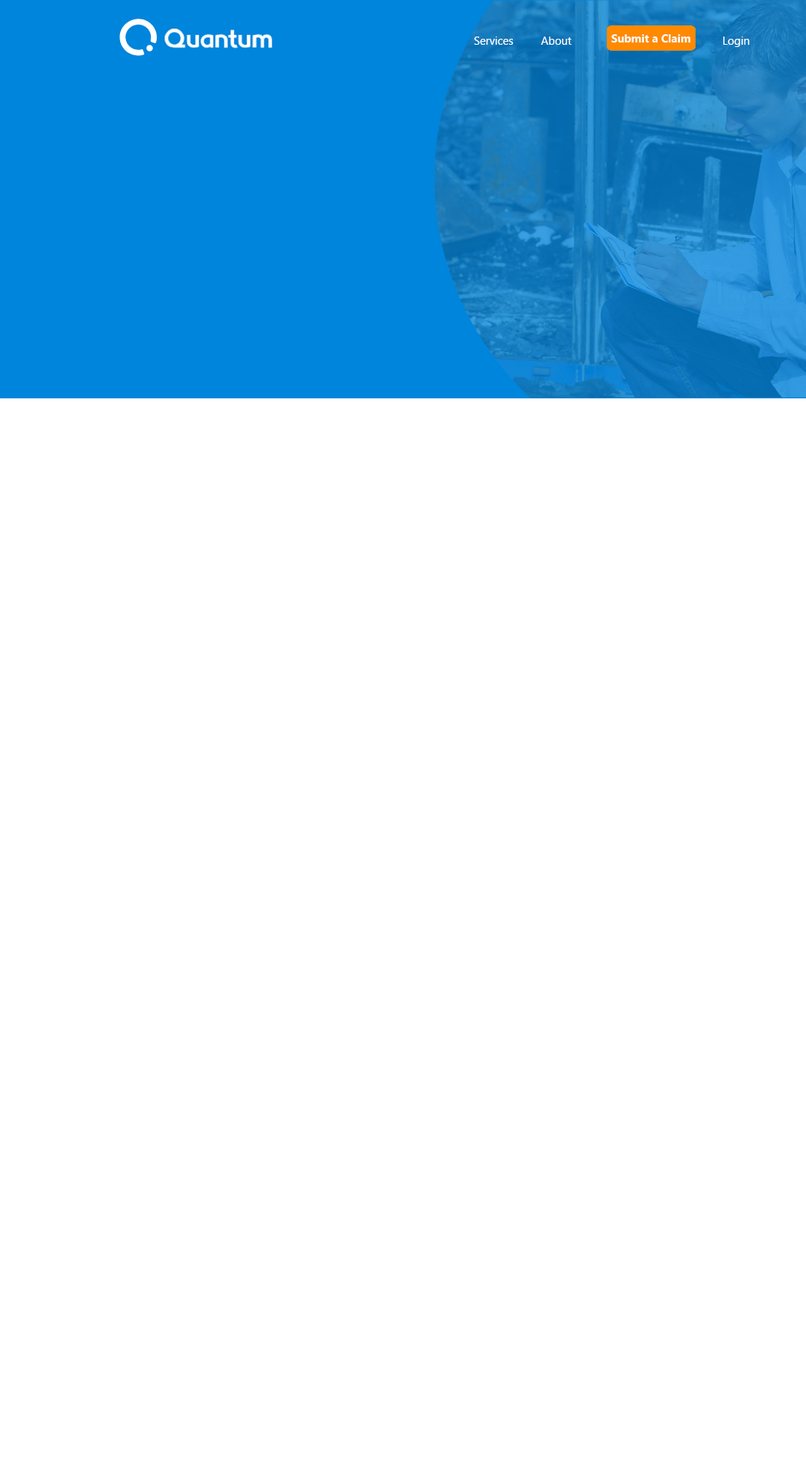
<style>
.page{position:relative;width:806px;height:1480px;background:#ffffff}
.page>*{position:absolute;margin:0}
.t1{font:11.2px "SegoeUI";color:#ffffff}
.t2{font:11.2px "SegoeUI-Bold";color:#ffffff}
</style>
<div class="page">
<p class="t1" style="left:474px;top:37px;width:39px;height:8px">Services</p>
<p class="t1" style="left:541px;top:37px;width:30px;height:8px">About</p>
<p class="t2" style="left:611px;top:34px;width:79px;height:9px">Submit a Claim</p>
<p class="t1" style="left:723px;top:37px;width:26px;height:10px">Login</p>
</div>
